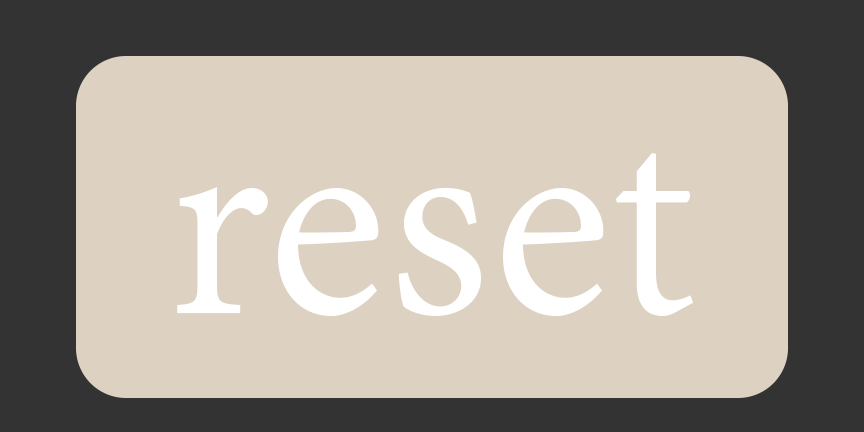
<style>
.page{position:relative;width:864px;height:432px;background:#ddd1c2}
.page>*{position:absolute;margin:0}
.t1{font:300px "AdobeDevanagari-Regular";color:#ffffff}
</style>
<div class="page">
<p class="t1" style="left:177px;top:153px;width:517px;height:164px">reset</p>
</div>
